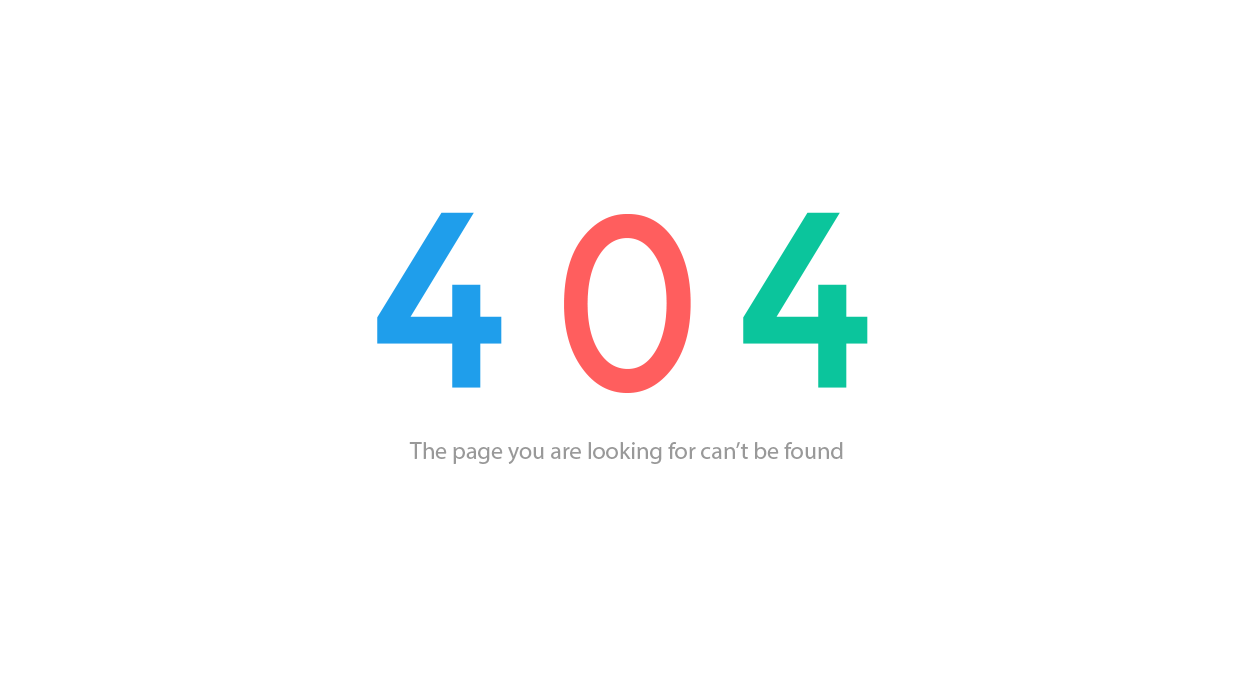
<style>
.page{position:relative;width:1240px;height:700px;background:#ffffff}
.page>*{position:absolute;margin:0}
.t1{font:250px "Montserrat-Regular";color:#1f9eeb}
.t2{font:270px "TwCenMT-Regular";color:#fe5e5e}
.t3{font:250px "Montserrat-Regular";color:#0bc59c}
.t4{font:24px "MyriadPro-Regular";color:#999999}
</style>
<div class="page">
<p class="t1" style="left:377px;top:212px;width:125px;height:176px">4</p>
<p class="t2" style="left:564px;top:214px;width:127px;height:179px">0</p>
<p class="t3" style="left:743px;top:212px;width:125px;height:176px">4</p>
<p class="t4" style="left:409px;top:442px;width:434px;height:22px">The page you are looking for can’t be found</p>
</div>
